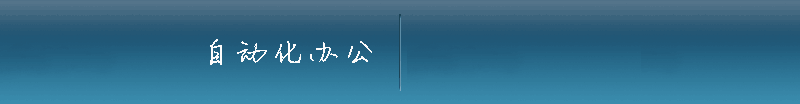
<style>
.page{position:relative;width:800px;height:104px}
.page>*{position:absolute;margin:0}
.t1{font:36px "¢è?";color:#fcfbfb}
</style>
<div class="page">
<p class="t1" style="left:210px;top:39px;width:162px;height:26px">自动化办公</p>
</div>
